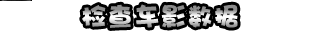
<style>
.page{position:relative;width:320px;height:32px;background:#ffffff}
.page>*{position:absolute;margin:0}
.t1{font:25.3px "DFPHaiBaoW12";letter-spacing:0.05em}
</style>
<div class="page">
<p class="t1" style="left:82px;top:4px;width:156px;height:24px">检查车影数据</p>
</div>
